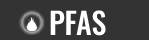
<style>
.page{position:relative;width:149px;height:40px;background:#333333}
.page>*{position:absolute;margin:0}
.t1{font:30px "Oswald-Medium";color:#ffffff;text-transform:uppercase}
</style>
<div class="page">
<p class="t1" style="left:50px;top:10px;width:56px;height:26px">pfas</p>
</div>
